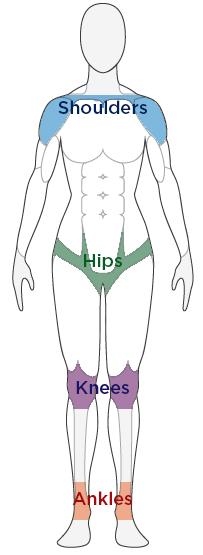
<style>
.page{position:relative;width:203px;height:555px;background:#ffffff}
.page>*{position:absolute;margin:0}
.t1{font:18px "Gotham-Medium";color:#002157}
.t2{font:18px "Gotham-Medium";color:#005e20}
.t3{font:18px "Gotham-Medium";color:#1b1464}
.t4{font:18px "Gotham-Medium";color:#9e0b0f}
</style>
<div class="page">
<p class="t1" style="left:58px;top:100px;width:89px;height:14px">Shoulders</p>
<p class="t2" style="left:84px;top:254px;width:38px;height:16px">Hips</p>
<p class="t3" style="left:76px;top:381px;width:53px;height:13px">Knees</p>
<p class="t4" style="left:72px;top:491px;width:60px;height:14px">Ankles</p>
</div>
